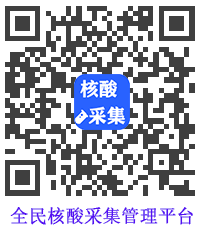
<style>
.page{position:relative;width:200px;height:230px;background:#ffffff}
.page>*{position:absolute;margin:0}
.t1{font:18px "SimSun";color:#5510f2;font-weight:bold}
</style>
<div class="page">
<p class="t1" style="left:10px;top:207px;width:183px;height:18px">全民核酸采集管理平台</p>
</div>
